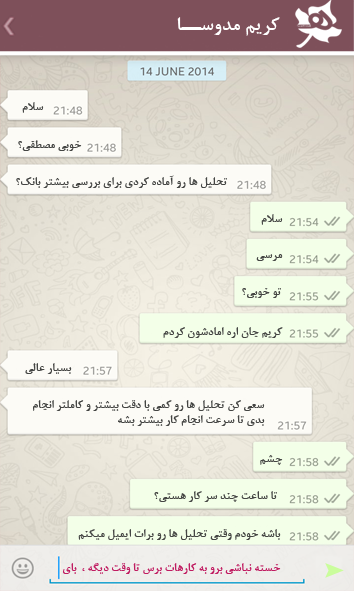
<style>
.page{position:relative;width:354px;height:591px}
.page>*{position:absolute;margin:0}
.t1{font:20.8px "BNazaninBold";color:#ffffff}
.t2{font:12.5px "BNazaninBold";color:#444543}
.t3{font:12.5px "BNazaninBold";color:#c01c61}
</style>
<div class="page">
<p class="t1" style="left:177px;top:17px;width:103px;height:19px">کريم مدوســا</p>
<p class="t2" style="left:22px;top:102px;width:22px;height:11px">سلام</p>
<p class="t2" style="left:18px;top:140px;width:64px;height:11px">خوبي مصطفي؟</p>
<p class="t2" style="left:16px;top:175px;width:211px;height:13px">تحليل ها رو آماده کردي براي بررسي بيشتر بانک؟</p>
<p class="t2" style="left:261px;top:214px;width:22px;height:11px">سلام</p>
<p class="t2" style="left:256px;top:254px;width:27px;height:7px">مرسي</p>
<p class="t2" style="left:242px;top:288px;width:39px;height:10px">تو خوبي؟</p>
<p class="t2" style="left:163px;top:327px;width:120px;height:11px">کريم جان اره امادشون کردم</p>
<p class="t2" style="left:25px;top:363px;width:47px;height:11px">بسيار عالي</p>
<p class="t2" style="left:33px;top:400px;width:232px;height:26px">سعي کن تحليل ها رو کمي با دقت بيشتر و کاملتر انجام<br>بدي تا سرعت انجام کار بيشتر بشه</p>
<p class="t2" style="left:260px;top:455px;width:23px;height:10px">چشم</p>
<p class="t2" style="left:154px;top:491px;width:123px;height:11px">تا ساعت چند سر کار هستي؟</p>
<p class="t2" style="left:78px;top:529px;width:203px;height:11px">باشه خودم وقتي تحليل ها رو برات ايميل ميکنم</p>
<p class="t3" style="left:63px;top:563px;width:218px;height:11px">خسته نباشي برو به کارهات برس تا وقت ديگه ،  باي</p>
</div>
